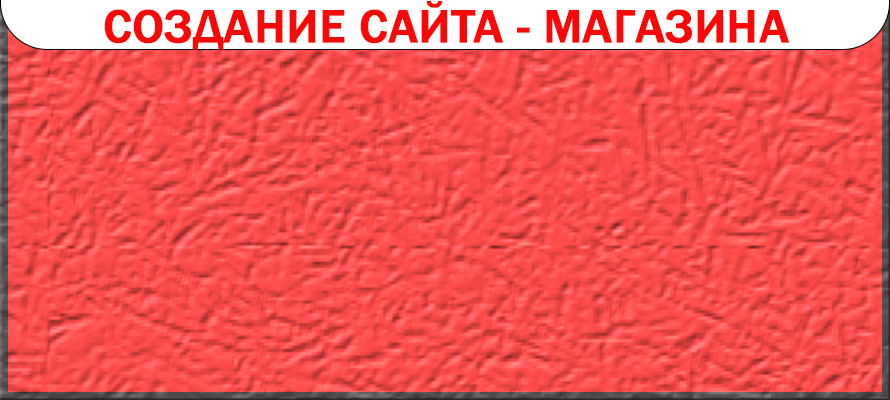
<style>
.page{position:relative;width:890px;height:400px}
.page>*{position:absolute;margin:0}
.t1{font:48px "FranklinGothic-Medium";color:#fc0707;text-transform:uppercase;font-weight:bold}
</style>
<div class="page">
<p class="t1" style="left:104px;top:1px;width:685px;height:49px">Создание сайта - МАГАЗИНА</p>
</div>
